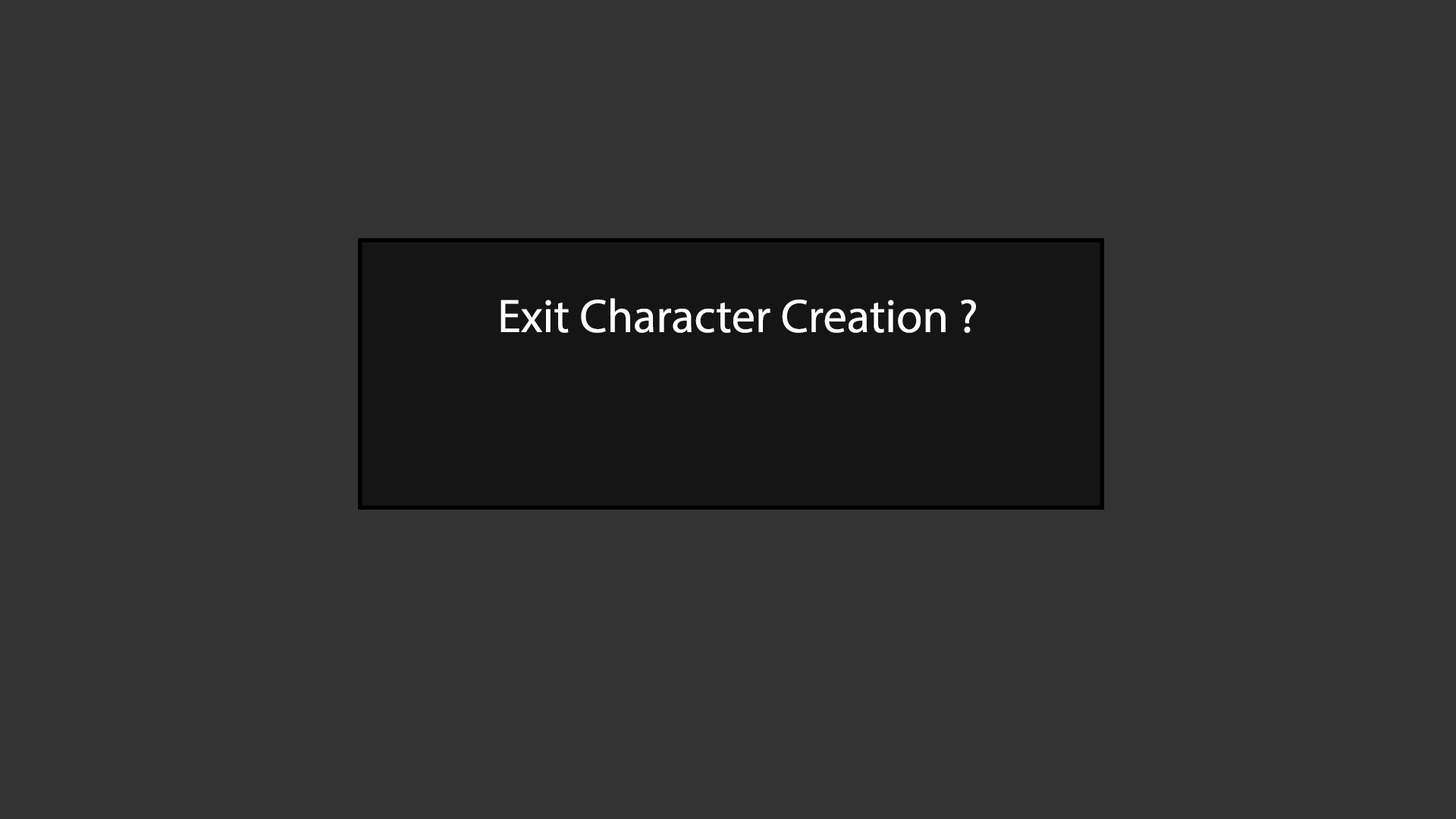
<style>
.page{position:relative;width:1456px;height:819px;background:#333333}
.page>*{position:absolute;margin:0}
.t1{font:47.4px "MyriadPro-Regular";color:#ffffff}
</style>
<div class="page">
<p class="t1" style="left:500px;top:298px;width:476px;height:35px">Exit Character Creation ?</p>
</div>
